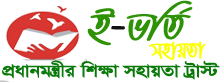
<style>
.page{position:relative;width:221px;height:82px;background:#ffffff}
.page>*{position:absolute;margin:0}
.t1{font:44.5px "TeeshtaMJ-Bold";color:#2e9206}
.t2{font:44.5px "TeeshtaMJ-Bold";color:#10130f}
.t3{font:24px "TeeshtaMJ-Bold";color:#fcff00}
.t4{font:19.9px "SutonnyMJ-Bold";color:#097909;scale:1.18 1}
</style>
<div class="page">
<p class="t1" style="left:87px;top:0px;width:106px;height:46px">B<span class="t2">-</span>fwZ©</p>
<p class="t3" style="left:149px;top:41px;width:57px;height:19px">mnvqZv</p>
<p class="t4" style="left:2px;top:60px;width:218px;height:20px">cÖavbgš¿xi wk¶v mnvqZv Uªv÷</p>
</div>
